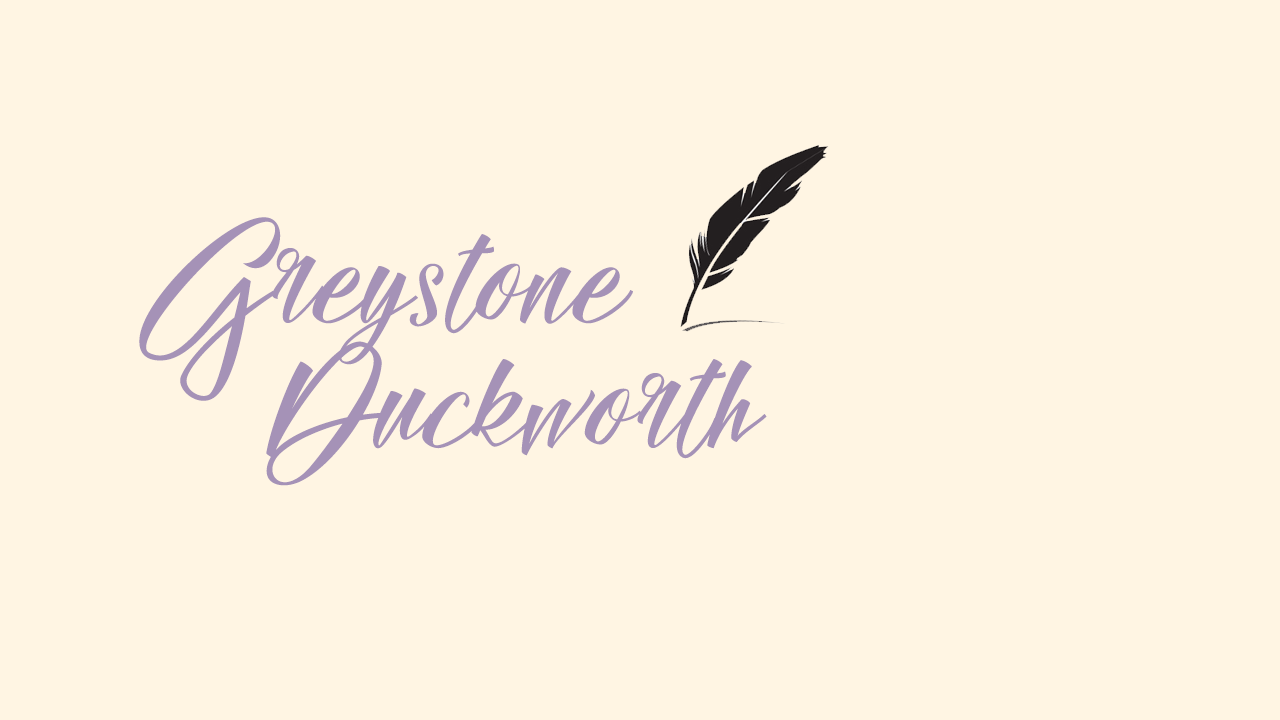
<style>
.page{position:relative;width:1280px;height:720px;background:#fff5e3}
.page>*{position:absolute;margin:0}
.t1{font:150px/83.3px "Hallelujah";letter-spacing:0.015em;color:#a592b7}
</style>
<div class="page">
<p class="t1" style="left:139px;top:217px;width:628px;height:269px;text-align:center">Greystone <br>      Duckworth</p>
</div>
